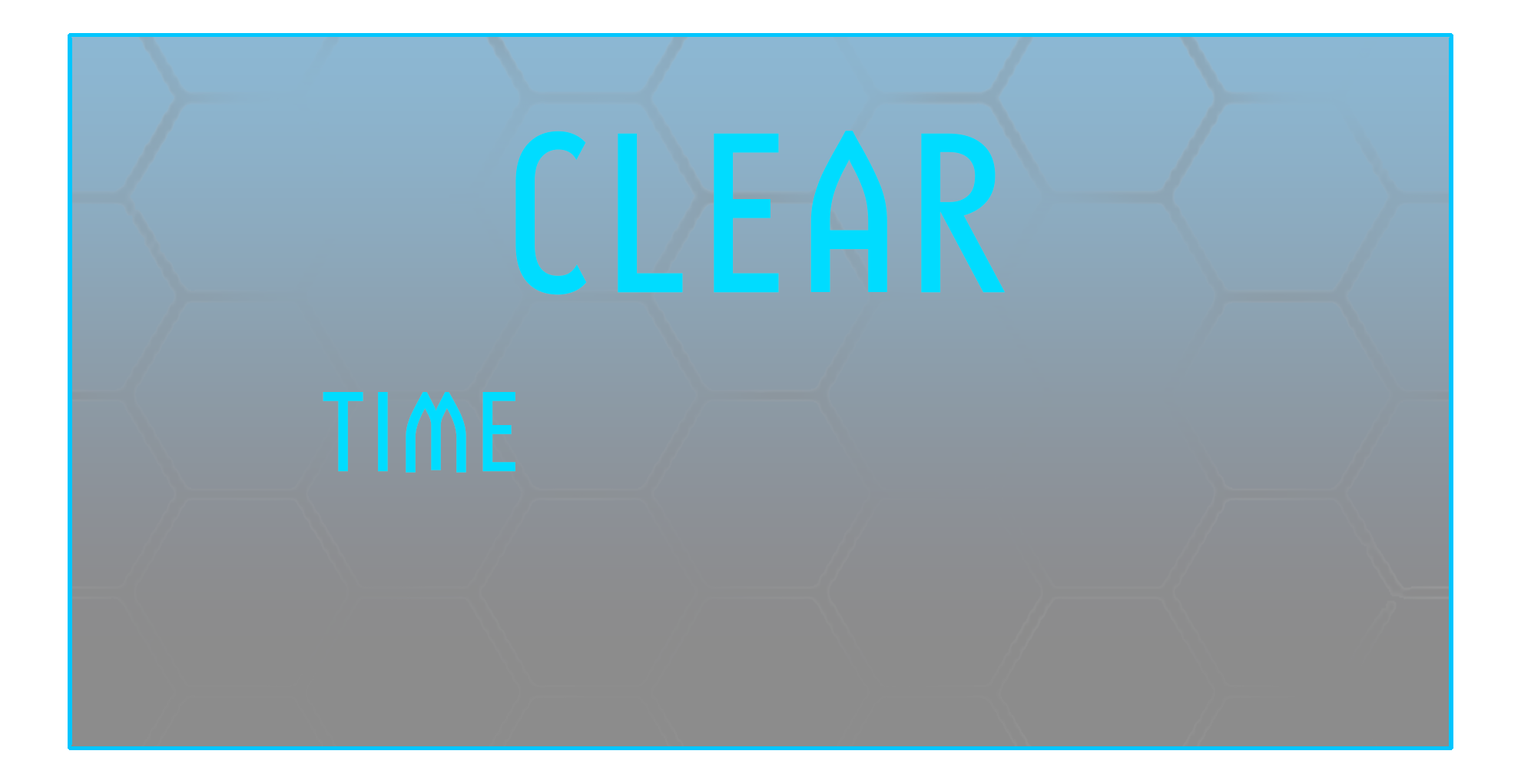
<style>
.page{position:relative;width:1521px;height:784px}
.page>*{position:absolute;margin:0}
.t1{font:230.5px "Kaisotai-Next-UP-B";letter-spacing:0.075em;color:#00dcff}
.t2{font:115.3px "Kaisotai-Next-UP-B";letter-spacing:0.075em;color:#00dcff}
</style>
<div class="page">
<p class="t1" style="left:516px;top:131px;width:489px;height:164px">CLEAR</p>
<p class="t2" style="left:323px;top:392px;width:193px;height:81px">TIME</p>
</div>
